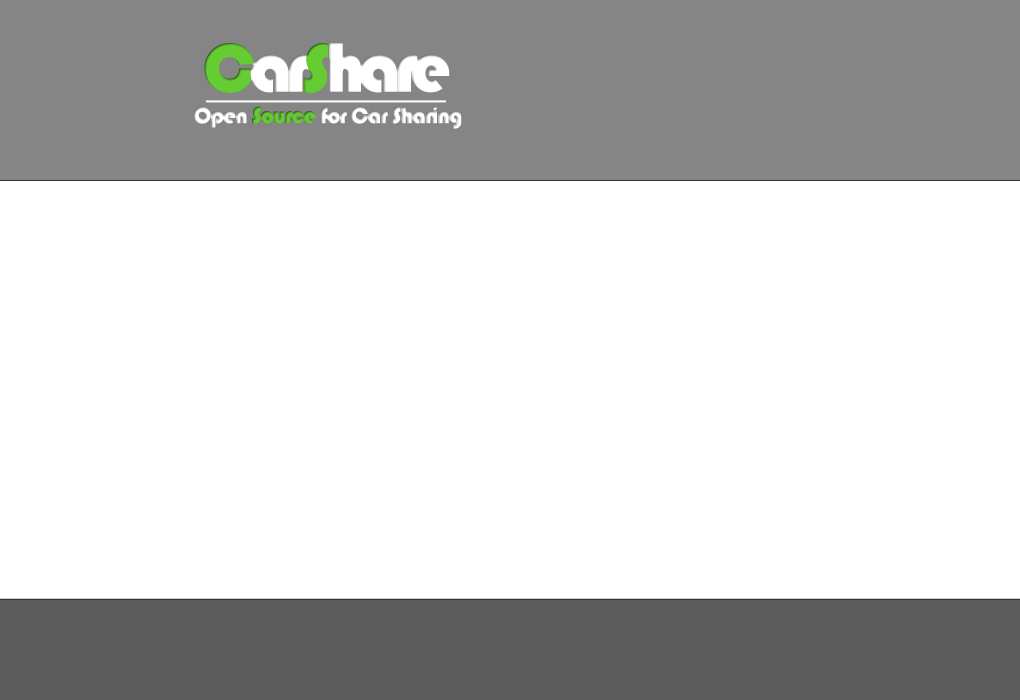
<style>
.page{position:relative;width:1020px;height:700px;background:#ffffff}
.page>*{position:absolute;margin:0}
.t1{font:73.8px "Bauhaus93";letter-spacing:-0.1em;color:#ffffff}
.t2{font:70.9px "Bauhaus93";letter-spacing:-0.1em;color:#66cc33}
.t3{font:70.9px "Bauhaus93";letter-spacing:-0.075em;color:#66cc33}
.t4{font:24px "Bauhaus93";letter-spacing:-0.05em;color:#ffffff}
.t5{font:24px "Bauhaus93";letter-spacing:-0.05em;color:#66cc33}
</style>
<div class="page">
<p class="t1" style="left:204px;top:42px;width:246px;height:51px"><span class="t2">C</span>ar<span class="t3">S</span>hare</p>
<p class="t4" style="left:193px;top:106px;width:269px;height:23px">Open <span class="t5">Source</span> for Car Sharing</p>
</div>
